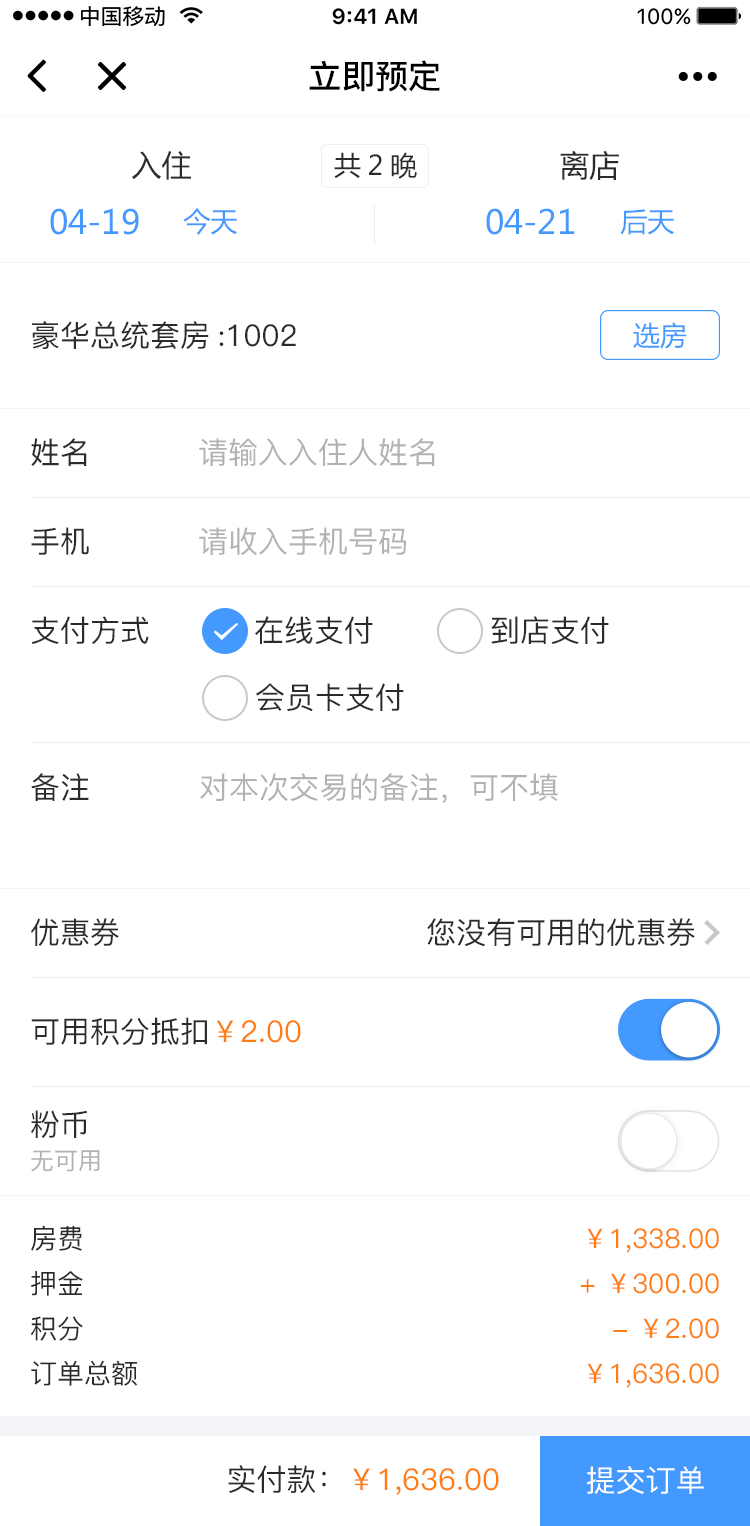
<style>
.page{position:relative;width:750px;height:1526px;background:#ffffff}
.page>*{position:absolute;margin:0}
.t1{font:33.2px "PingFang-SC-Bold";color:#000000}
.t2{font:30px "MicrosoftYaHei";color:#2b2b2b}
.t3{font:27px "MicrosoftYaHei";color:#2b2b2b}
.t4{font:33px "MicrosoftYaHei";color:#4499ff}
.t5{font:27px "MicrosoftYaHei";color:#4499ff}
.t6{font:30px "PingFang-SC-Medium";color:#2b2b2b}
.t7{font:30px "PingFang-SC-Medium";color:#b2b2b2}
.t8{font:30px "PingFang-SC-Medium";color:#ff7d13}
.t9{font:24px "PingFang-SC-Medium";color:#b2b2b2}
.t10{font:27px "PingFang-SC-Medium";color:#2b2b2b}
.t11{font:27px "PingFang-SC-Medium";color:#ff7d13}
.t12{font:30px "PingFang-SC-Medium";color:#ffffff}
</style>
<div class="page">
<p class="t1" style="left:309px;top:60px;width:131px;height:32px">立即预定</p>
<p class="t2" style="left:560px;top:150px;width:59px;height:30px">离店</p>
<p class="t2" style="left:132px;top:151px;width:59px;height:29px">入住</p>
<p class="t3" style="left:334px;top:152px;width:83px;height:27px">共2晚</p>
<p class="t4" style="left:50px;top:208px;width:89px;height:27px">04-19</p>
<p class="t5" style="left:183px;top:208px;width:54px;height:27px">今天</p>
<p class="t4" style="left:486px;top:208px;width:89px;height:27px">04-21</p>
<p class="t5" style="left:620px;top:209px;width:54px;height:26px">后天</p>
<p class="t6" style="left:32px;top:321px;width:264px;height:28px">豪华总统套房:1002</p>
<p class="t5" style="left:633px;top:322px;width:54px;height:27px">选房</p>
<p class="t6" style="left:31px;top:438px;width:56px;height:28px">姓名</p>
<p class="t7" style="left:199px;top:438px;width:236px;height:28px">请输入入住人姓名</p>
<p class="t6" style="left:31px;top:527px;width:58px;height:28px">手机</p>
<p class="t7" style="left:199px;top:527px;width:207px;height:28px">请收入手机号码</p>
<p class="t6" style="left:31px;top:616px;width:118px;height:28px">支付方式</p>
<p class="t6" style="left:255px;top:616px;width:118px;height:28px">在线支付</p>
<p class="t6" style="left:491px;top:616px;width:118px;height:28px">到店支付</p>
<p class="t6" style="left:256px;top:683px;width:148px;height:29px">会员卡支付</p>
<p class="t6" style="left:31px;top:773px;width:58px;height:28px">备注</p>
<p class="t7" style="left:200px;top:773px;width:358px;height:30px">对本次交易的备注，可不填</p>
<p class="t6" style="left:31px;top:918px;width:88px;height:28px">优惠券</p>
<p class="t6" style="left:427px;top:918px;width:268px;height:29px">您没有可用的优惠券</p>
<p class="t6" style="left:31px;top:1017px;width:270px;height:28px">可用积分抵扣<span class="t8">￥2.00</span></p>
<p class="t6" style="left:31px;top:1110px;width:57px;height:29px">粉币</p>
<p class="t9" style="left:31px;top:1150px;width:69px;height:22px">无可用</p>
<p class="t10" style="left:31px;top:1225px;width:51px;height:26px">房费</p>
<p class="t11" style="left:587px;top:1228px;width:132px;height:25px">￥1,338.00</p>
<p class="t10" style="left:31px;top:1271px;width:52px;height:25px">押金</p>
<p class="t11" style="left:580px;top:1273px;width:139px;height:21px">+ ￥300.00</p>
<p class="t10" style="left:31px;top:1316px;width:52px;height:25px">积分</p>
<p class="t11" style="left:613px;top:1318px;width:106px;height:21px">- ￥2.00</p>
<p class="t10" style="left:31px;top:1360px;width:106px;height:26px">订单总额</p>
<p class="t11" style="left:587px;top:1363px;width:132px;height:25px">￥1,636.00</p>
<p class="t8" style="left:228px;top:1465px;width:271px;height:30px"><span class="t6">实付款：</span>￥1,636.00</p>
<p class="t12" style="left:586px;top:1466px;width:118px;height:28px">提交订单</p>
</div>
